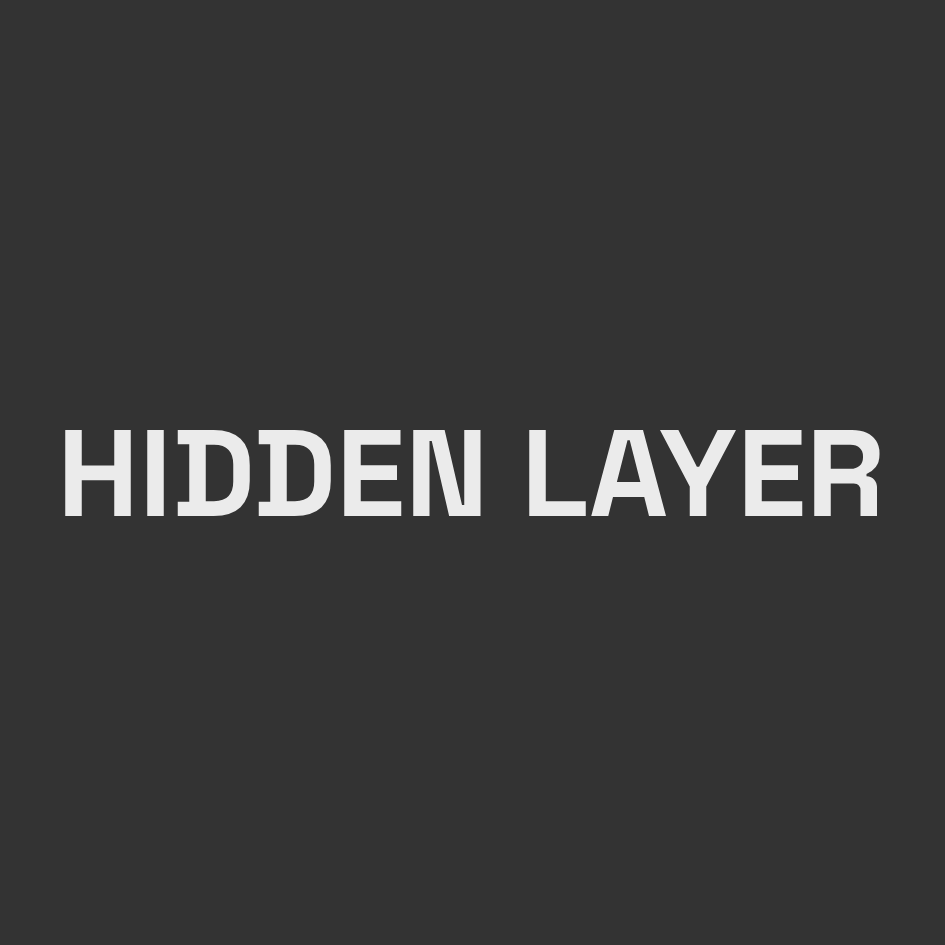
<style>
.page{position:relative;width:945px;height:945px;background:#333333}
.page>*{position:absolute;margin:0}
.t1{font:122.9px "SpaceGroteskLight-Bold";color:#ebebeb}
</style>
<div class="page">
<p class="t1" style="left:65px;top:430px;width:815px;height:86px">HIDDEN LAYER</p>
</div>
